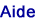
<style>
.page{position:relative;width:45px;height:20px;background:#ffffff}
.page>*{position:absolute;margin:0}
.t1{font:16px "ArialMT";letter-spacing:0.04em;color:#000099;font-weight:bold}
</style>
<div class="page">
<p class="t1" style="left:0px;top:5px;width:35px;height:13px">Aide</p>
</div>
